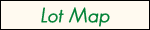
<style>
.page{position:relative;width:150px;height:30px;background:#fffaf0}
.page>*{position:absolute;margin:0}
.t1{font:20px "GeosansLight-Oblique";color:#008135;font-weight:bold}
</style>
<div class="page">
<p class="t1" style="left:41px;top:7px;width:69px;height:20px">Lot Map</p>
</div>
